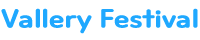
<style>
.page{position:relative;width:200px;height:40px;background:#ffffff}
.page>*{position:absolute;margin:0}
.t1{font:24.8px "Cafe24Ssurround";color:#1fa8ff}
</style>
<div class="page">
<p class="t1" style="left:1px;top:8px;width:197px;height:26px">Vallery Festival</p>
</div>
